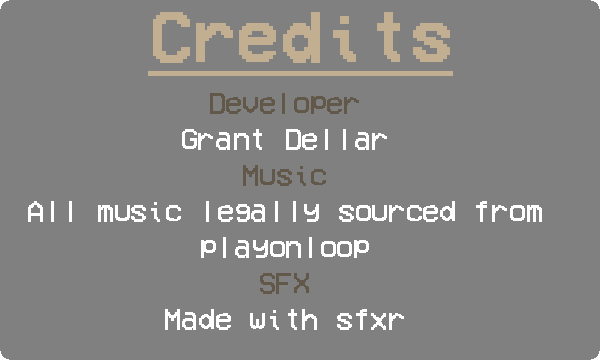
<style>
.page{position:relative;width:600px;height:360px;background:#808080}
.page>*{position:absolute;margin:0}
.t1{font:72px "VCROSDMono";letter-spacing:-0.01em;color:#c2af91;font-weight:bold;text-decoration:underline}
.t2{font:30px "VCROSDMono";letter-spacing:-0.01em;color:#ffffff}
.t3{font:30px "VCROSDMono";letter-spacing:-0.01em;color:#615849}
</style>
<div class="page">
<p class="t1" style="left:148px;top:12px;width:305px;height:64px">Credits</p>
<p class="t2" style="left:28px;top:93px;width:514px;height:237px;text-align:center"><span class="t3">Developer<br></span>Grant Dellar<br><span class="t3">Music<br></span>All music legally sourced from<br>playonloop<br><span class="t3">SFX<br></span>Made with sfxr</p>
</div>
